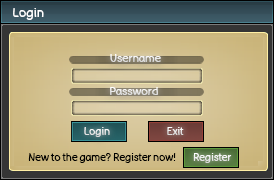
<style>
.page{position:relative;width:274px;height:180px}
.page>*{position:absolute;margin:0}
.t1{font:12px "BadComic";color:#ffffff}
.t2{font:11.1px "BadComic";color:#ebebeb}
.t3{font:10px "BadComic";color:#e6e6e6}
.t4{font:10px "BadComic";color:#ffffff}
.t5{font:10px "BadComic";color:#000000}
</style>
<div class="page">
<p class="t1" style="left:13px;top:8px;width:31px;height:12px">Login</p>
<p class="t2" style="left:110px;top:54px;width:51px;height:8px">Username</p>
<p class="t2" style="left:110px;top:87px;width:48px;height:8px">Password</p>
<p class="t3" style="left:84px;top:127px;width:26px;height:10px">Login</p>
<p class="t4" style="left:167px;top:127px;width:17px;height:8px">Exit</p>
<p class="t5" style="left:28px;top:153px;width:148px;height:10px">New to the game? Register now!</p>
<p class="t4" style="left:193px;top:153px;width:39px;height:10px">Register</p>
</div>
